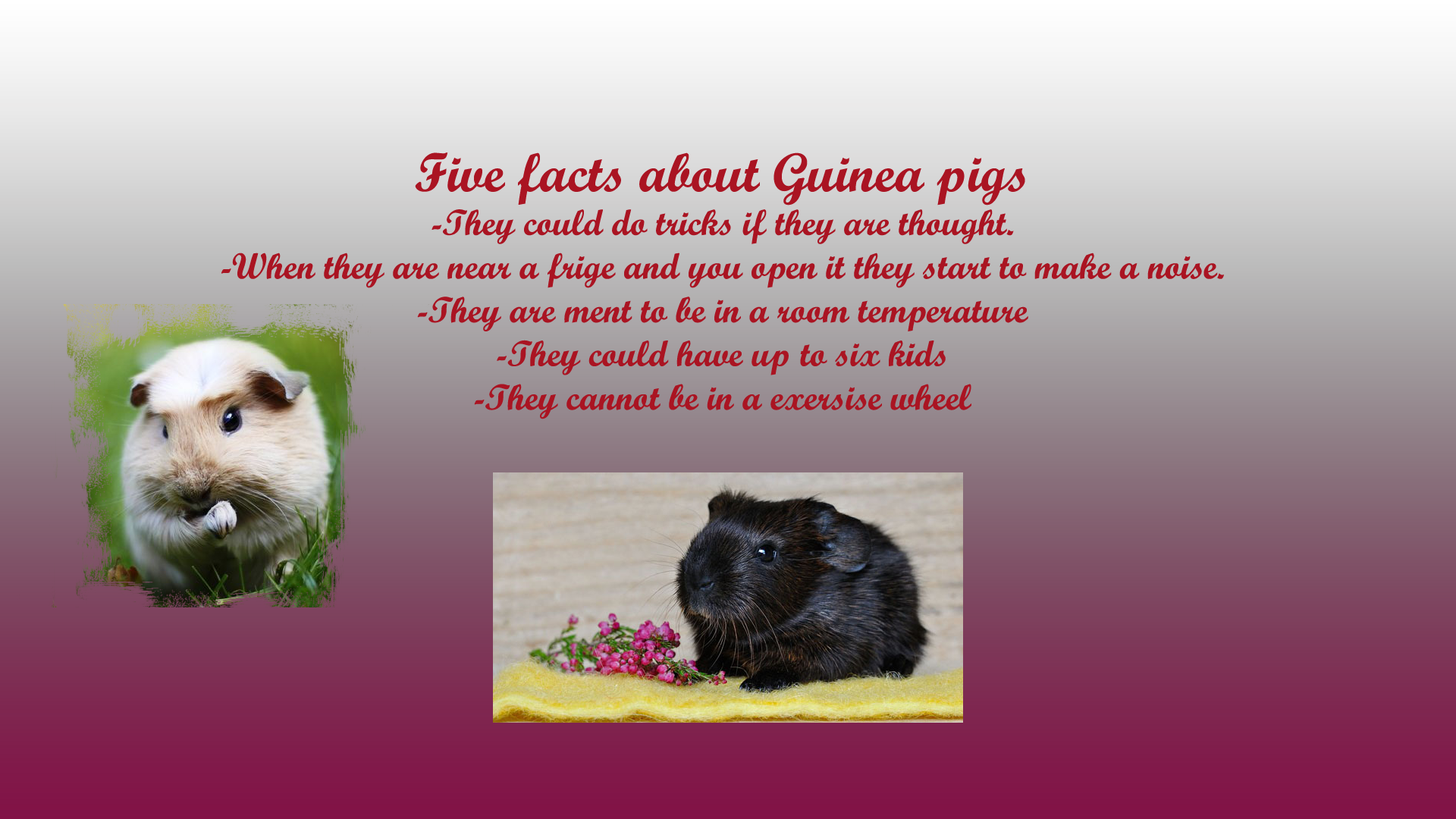
<style>
.page{position:relative;width:1456px;height:819px}
.page>*{position:absolute;margin:0}
.t1{font:36.4px "ScriptMTBold";color:#aa1422}
.t2{font:54.6px "ScriptMTBold";color:#aa1422}
</style>
<div class="page">
<p class="t1" style="left:221px;top:152px;width:1003px;height:267px;text-align:center"><span class="t2">Five facts about Guinea pigs<br></span>-They could do tricks if they are thought.<br>-When they are near a frige and you open it they start to make a noise.<br>-They are ment to be in a room temperature<br>-They could have up to six kids<br>-They cannot be in a exersise wheel</p>
</div>
